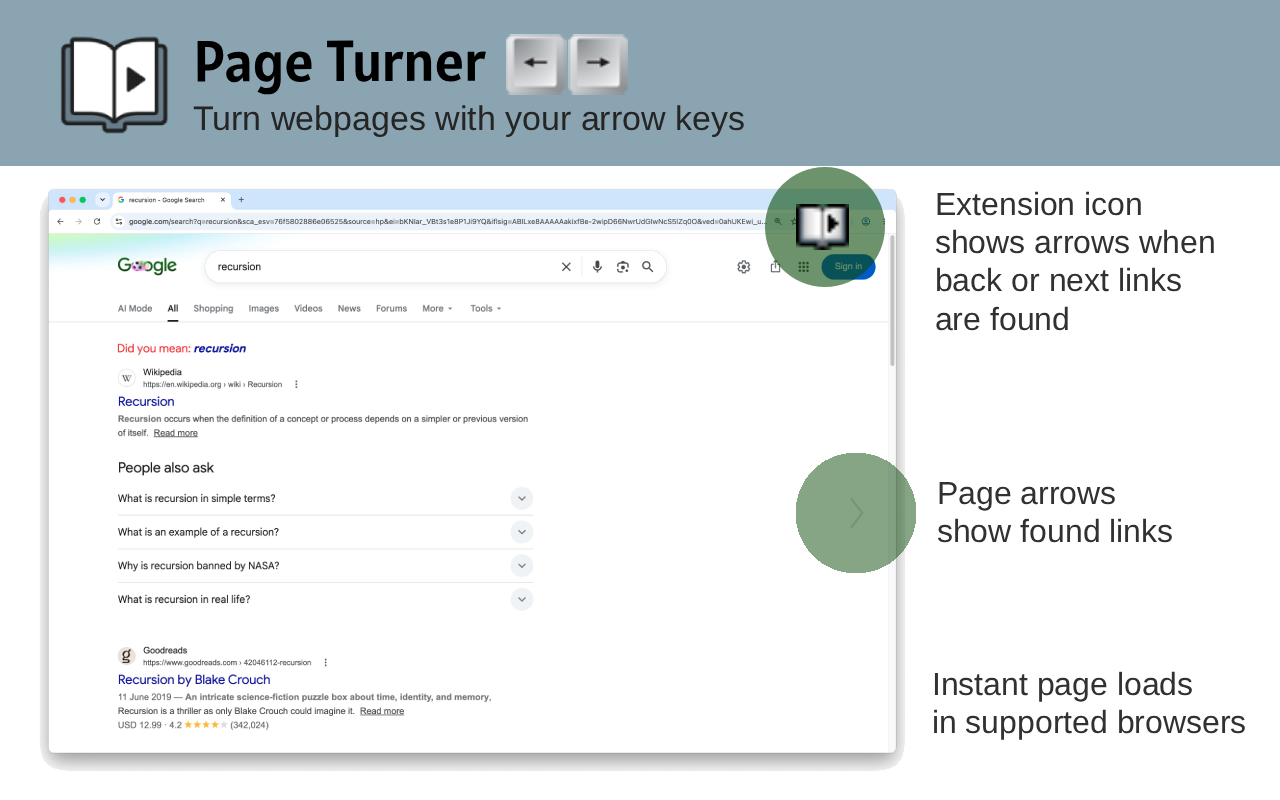
<style>
.page{position:relative;width:1280px;height:800px;background:#ffffff}
.page>*{position:absolute;margin:0}
.t1{font:58px "Alatsi-Regular";color:#000000}
.t2{font:34px "Helvetica";color:#252525}
.t3{font:32px "Helvetica";color:#313131}
</style>
<div class="page">
<p class="t1" style="left:197px;top:40px;width:289px;height:55px">Page Turner</p>
<p class="t2" style="left:193px;top:105px;width:551px;height:32px">Turn webpages with your arrow keys</p>
<p class="t3" style="left:935px;top:191px;width:279px;height:140px">Extension icon <br>shows arrows when <br>back or next links <br>are found</p>
<p class="t3" style="left:937px;top:481px;width:235px;height:62px">Page arrows <br>show found links</p>
<p class="t3" style="left:934px;top:671px;width:311px;height:69px">Instant page loads<br>in supported browsers</p>
</div>
